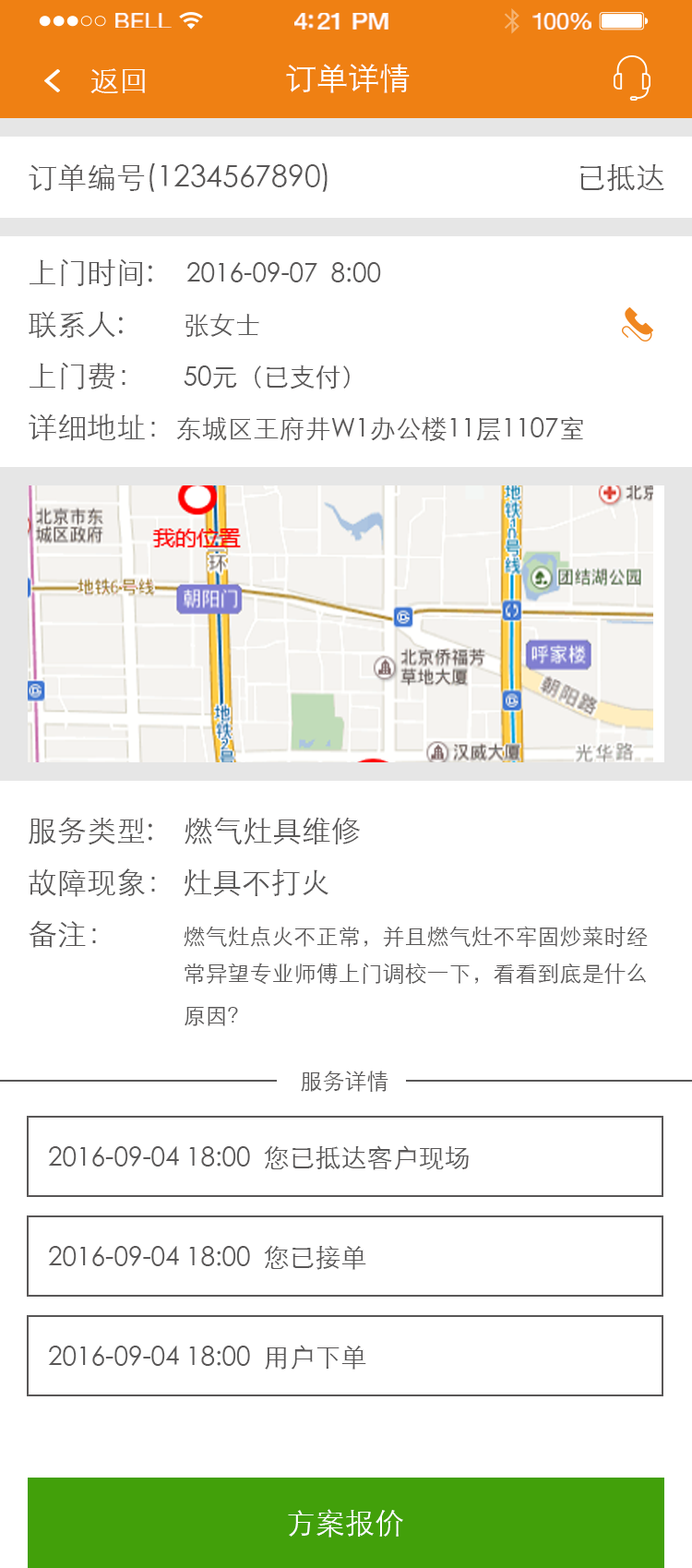
<style>
.page{position:relative;width:692px;height:1568px;background:#ffffff}
.page>*{position:absolute;margin:0}
.t1{font:21.5px "HelveticaNeue";letter-spacing:0.02em;color:#ffffff;scale:1.06 1}
.t2{font:23.3px "HelveticaNeue-Medium";letter-spacing:-0.02em;color:#ffffff;scale:1.06 1}
.t3{font:22.4px "HelveticaNeue";letter-spacing:-0.02em;color:#ffffff;scale:1.06 1}
.t4{font:31.4px "STXihei";color:#ffffff}
.t5{font:29.5px "STXihei";color:#ffffff}
.t6{font:29.5px "STXihei";color:#595757}
.t7{font:25.8px/51.7px "STXihei";color:#595757}
.t8{font:29.5px/51.7px "STXihei";color:#595757}
.t9{font:25.8px "STXihei";color:#595757}
.t10{font:22.1px/42.5px "STXihei";color:#595757}
.t11{font:29.5px/42.5px "STXihei";color:#595757}
.t12{font:22.1px/51.7px "STXihei";color:#595757}
.t13{font:22.6px "STXihei";color:#595757}
</style>
<div class="page">
<p class="t1" style="left:115px;top:13px;width:57px;height:15px">BELL</p>
<p class="t2" style="left:294px;top:13px;width:95px;height:17px">4:21 PM</p>
<p class="t3" style="left:533px;top:13px;width:59px;height:17px">100%</p>
<p class="t4" style="left:286px;top:64px;width:124px;height:29px">订单详情</p>
<p class="t5" style="left:90px;top:68px;width:55px;height:25px">返回</p>
<p class="t6" style="left:29px;top:163px;width:299px;height:29px">订单编号(1234567890)</p>
<p class="t6" style="left:581px;top:164px;width:83px;height:27px">已抵达</p>
<p class="t7" style="left:29px;top:258px;width:554px;height:183px"><span class="t8">上门时间:<br>联系人:        </span>张女士<br><span class="t8">上门费：     </span>50元（已支付）<br><span class="t8">详细地址：</span>东城区王府井W1办公楼11层1107室</p>
<p class="t9" style="left:186px;top:262px;width:195px;height:20px">2016-09-07  8:00</p>
<p class="t10" style="left:29px;top:817px;width:619px;height:209px"><span class="t8">服务类型:    燃气灶具维修<br>故障现象： 灶具不打火<br></span><span class="t11">备注：         </span>燃气灶点火不正常，并且燃气灶不牢固炒菜时经<br>                            常异望专业师傅上门调校一下，看看到底是什么<br>                            原因<span class="t12">？</span></p>
<p class="t13" style="left:301px;top:1071px;width:88px;height:21px">服务详情</p>
<p class="t9" style="left:48px;top:1145px;width:421px;height:25px">2016-09-04 18:00  您已抵达客户现场</p>
<p class="t9" style="left:48px;top:1245px;width:318px;height:25px">2016-09-04 18:00  您已接单</p>
<p class="t9" style="left:48px;top:1345px;width:318px;height:25px">2016-09-04 18:00  用户下单</p>
<p class="t5" style="left:288px;top:1509px;width:115px;height:29px">方案报价</p>
</div>
